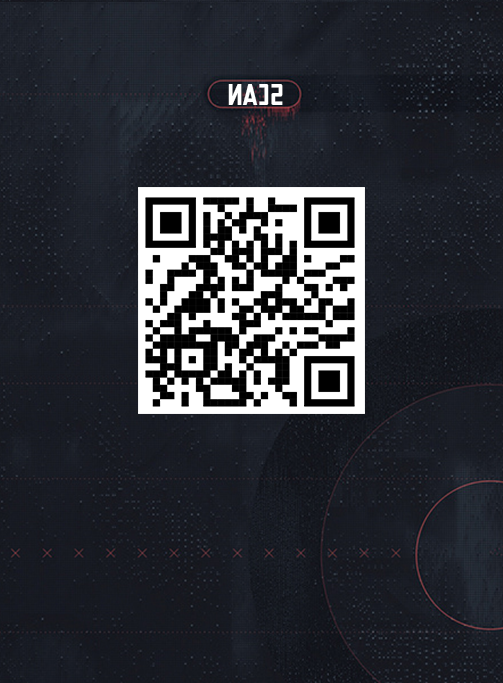
<style>
.page{position:relative;width:503px;height:683px}
.page>*{position:absolute;margin:0}
.t1{font:29.3px "Tschichold-Bold";color:#ffffff;text-transform:uppercase}
</style>
<div class="page">
<p class="t1" style="left:228px;top:84px;width:55px;height:21px;rotate:180deg">Scan</p>
</div>
